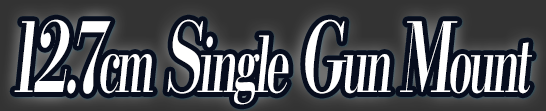
<style>
.page{position:relative;width:546px;height:111px;background:#070d1d}
.page>*{position:absolute;margin:0}
.t1{font:76.8px "KochoStd-Heavy";letter-spacing:-0.08em;color:#ffffff;font-style:italic;scale:0.57 1}
.t2{font:96px "KochoStd-Heavy";letter-spacing:-0.08em;color:#ffffff;font-style:italic;scale:0.57 1}
</style>
<div class="page">
<p class="t1" style="left:14px;top:19px;width:518px;height:86px"><span class="t2">12.7</span>cm<span class="t2"> S</span>ingle<span class="t2"> G</span>un <span class="t2">M</span>ount</p>
</div>
